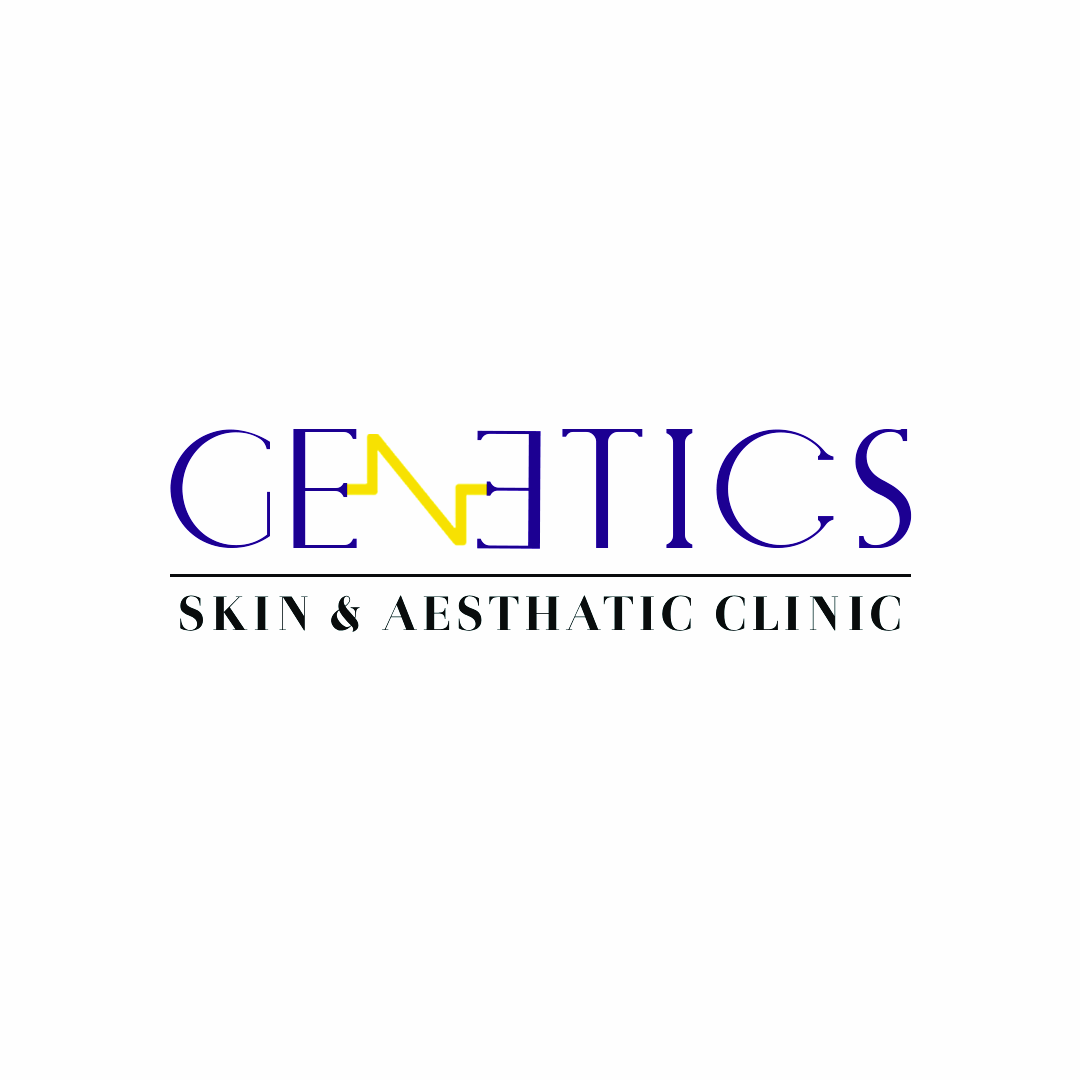
<style>
.page{position:relative;width:1080px;height:1080px;background:#fefefe}
.page>*{position:absolute;margin:0}
.t1{font:174.6px "ELEGANTPersonaluse";letter-spacing:0.1em;color:#1c0092;text-transform:uppercase}
.t2{font:48px "Otama-ep";letter-spacing:0.1em;color:#050505;text-transform:uppercase}
</style>
<div class="page">
<p class="t1" style="left:170px;top:429px;width:742px;height:119px">GE   TICS</p>
<p class="t1" style="left:477px;top:430px;width:64px;height:119px;rotate:-180deg">E</p>
<p class="t2" style="left:180px;top:595px;width:720px;height:37px">SKIN &amp; AESTHATIC CLINIC</p>
</div>
